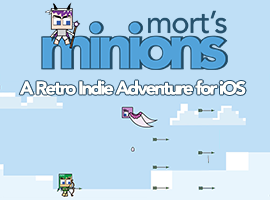
<style>
.page{position:relative;width:270px;height:200px;background:#bfdff6}
.page>*{position:absolute;margin:0}
.t1{font:18.5px "Avenir-Black";letter-spacing:-0.1em;color:#fefffd}
</style>
<div class="page">
<p class="t1" style="left:19px;top:80px;width:227px;height:15px">A Retro Indie Adventure for iOS</p>
</div>
